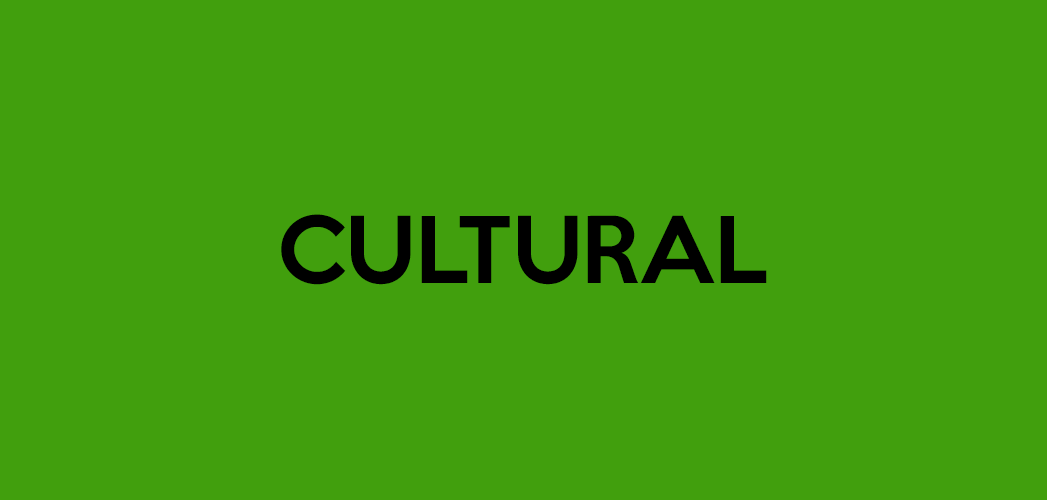
<style>
.page{position:relative;width:1047px;height:500px;background:#419f0d}
.page>*{position:absolute;margin:0}
.t1{font:84px "KeepCalm-Medium";color:#000000}
</style>
<div class="page">
<p class="t1" style="left:281px;top:214px;width:486px;height:71px">CULTURAL</p>
</div>
